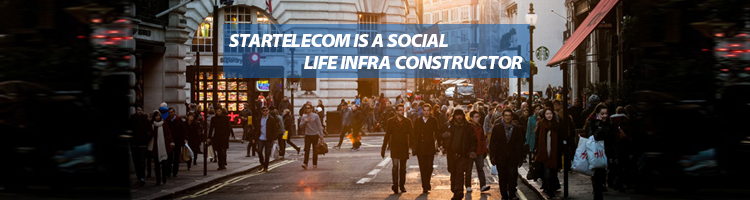
<style>
.page{position:relative;width:750px;height:200px}
.page>*{position:absolute;margin:0}
.t1{font:18px "MyriadPro-BlackSemiExtIt";letter-spacing:-0.025em;color:#ffffff;text-transform:uppercase}
</style>
<div class="page">
<p class="t1" style="left:229px;top:34px;width:294px;height:35px">Startelecom is a social <br>                     life infra constructor</p>
</div>
